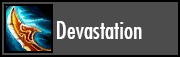
<style>
.page{position:relative;width:180px;height:57px;background:#4c4c4c}
.page>*{position:absolute;margin:0}
.t1{font:24px "FuturaCondensed";color:#ffffff}
</style>
<div class="page">
<p class="t1" style="left:57px;top:21px;width:85px;height:18px">Devastation</p>
</div>
